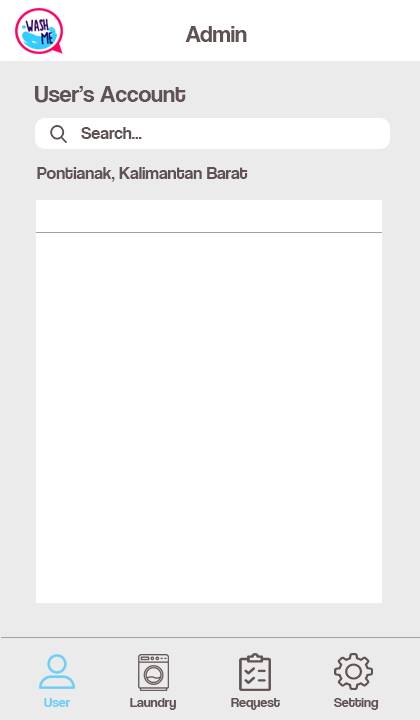
<style>
.page{position:relative;width:420px;height:720px;background:#ffffff}
.page>*{position:absolute;margin:0}
.t1{font:24px "CoolveticaRg-Regular";color:#605252}
.t2{font:18px "CoolveticaRg-Regular";color:#605252}
.t3{font:14px "CoolveticaRg-Regular";color:#6dcff6}
.t4{font:14px "CoolveticaRg-Regular";color:#605252}
</style>
<div class="page">
<p class="t1" style="left:185px;top:26px;width:62px;height:16px">Admin</p>
<p class="t1" style="left:35px;top:86px;width:151px;height:17px">User’s Account</p>
<p class="t2" style="left:81px;top:127px;width:61px;height:12px">Search...</p>
<p class="t2" style="left:37px;top:167px;width:211px;height:15px">Pontianak, Kalimantan Barat</p>
<p class="t3" style="left:44px;top:698px;width:27px;height:9px">User</p>
<p class="t4" style="left:130px;top:698px;width:46px;height:12px">Laundry</p>
<p class="t4" style="left:231px;top:698px;width:49px;height:12px">Request</p>
<p class="t4" style="left:334px;top:698px;width:45px;height:12px">Setting</p>
</div>
